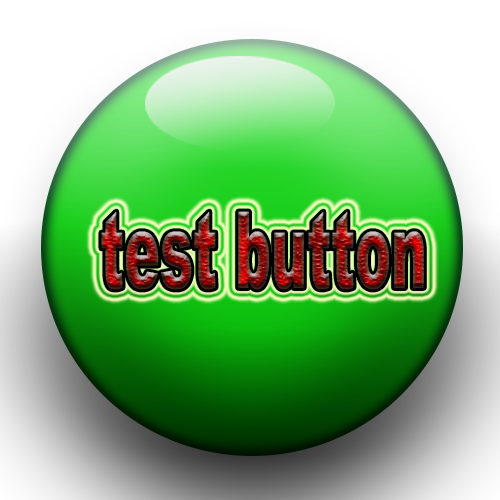
<style>
.page{position:relative;width:500px;height:500px}
.page>*{position:absolute;margin:0}
.t1{font:106.5px "Arial-Black";scale:0.51 1}
</style>
<div class="page">
<p class="t1" style="left:101px;top:211px;width:323px;height:79px">test button</p>
</div>
